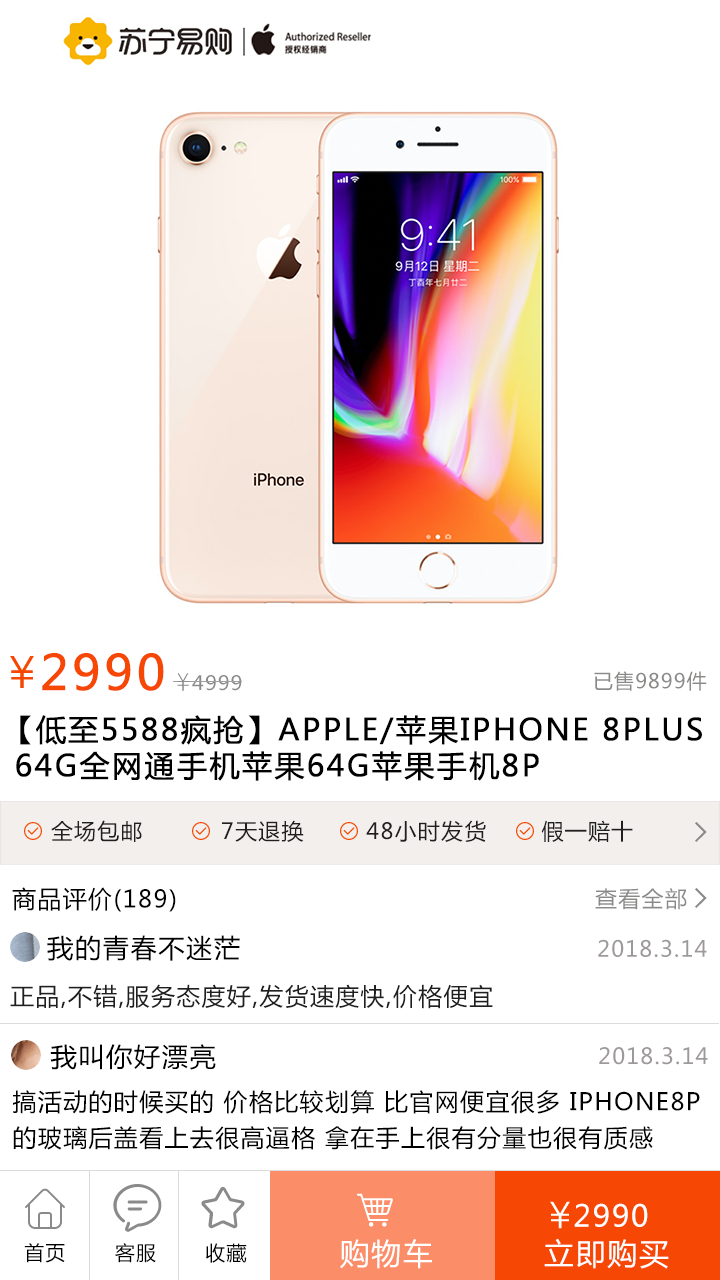
<style>
.page{position:relative;width:720px;height:1280px;background:#ffffff}
.page>*{position:absolute;margin:0}
.t1{font:48px "MicrosoftYaHei";letter-spacing:0.055em;color:#f64804;text-transform:uppercase;font-weight:bold}
.t2{font:48px "MicrosoftYaHei";letter-spacing:0.055em;color:#8c8a89;text-transform:uppercase}
.t3{font:19.6px "MicrosoftYaHei";letter-spacing:0.055em;color:#8c8a89;text-transform:uppercase}
.t4{font:20.3px "MicrosoftYaHei";letter-spacing:0.055em;color:#8c8a89;text-transform:uppercase}
.t5{font:30px/36px "MicrosoftYaHei";letter-spacing:0.055em;color:#000000;text-transform:uppercase;font-weight:bold}
.t6{font:22px "MicrosoftYaHei";letter-spacing:0.055em;color:#201f1f;text-transform:uppercase}
.t7{font:24px "MicrosoftYaHei";letter-spacing:0.055em;color:#000000;text-transform:uppercase}
.t8{font:22px "MicrosoftYaHei";letter-spacing:0.055em;color:#8c8a89;text-transform:uppercase}
.t9{font:26px "MicrosoftYaHei";letter-spacing:0.055em;color:#000000;text-transform:uppercase}
.t10{font:22px "MicrosoftYaHei";letter-spacing:0.055em;color:#9d9998;text-transform:uppercase}
.t11{font:24px "MicrosoftYaHei";letter-spacing:0.055em;color:#201f1f;text-transform:uppercase}
.t12{font:24px/36px "MicrosoftYaHei";letter-spacing:0.055em;color:#000000;text-transform:uppercase}
.t13{font:30px "MicrosoftYaHei";letter-spacing:0.055em;color:#ffffff;text-transform:uppercase}
.t14{font:20px "MicrosoftYaHei";letter-spacing:0.055em;color:#000000;text-transform:uppercase}
</style>
<div class="page">
<p class="t1" style="left:42px;top:653px;width:122px;height:38px"><span class="t2">    </span>2990</p>
<p class="t3" style="left:192px;top:675px;width:50px;height:16px">4999</p>
<p class="t4" style="left:594px;top:671px;width:113px;height:20px">已售9899件</p>
<p class="t5" style="left:16px;top:715px;width:686px;height:66px">【低至5588疯抢】Apple/苹果iPhone 8Plus<br> 64G全网通手机苹果64G苹果手机8p</p>
<p class="t6" style="left:51px;top:820px;width:582px;height:22px">全场包邮          7天退换        48小时发货       假一赔十</p>
<p class="t7" style="left:12px;top:887px;width:164px;height:25px">商品评价(189)</p>
<p class="t8" style="left:595px;top:888px;width:92px;height:22px">查看全部</p>
<p class="t9" style="left:47px;top:935px;width:193px;height:26px">我的青春不迷茫</p>
<p class="t10" style="left:598px;top:939px;width:109px;height:18px">2018.3.14</p>
<p class="t11" style="left:10px;top:984px;width:483px;height:25px">正品,不错,服务态度好,发货速度快,价格便宜</p>
<p class="t9" style="left:50px;top:1044px;width:166px;height:26px">我叫你好漂亮</p>
<p class="t10" style="left:599px;top:1047px;width:109px;height:18px">2018.3.14</p>
<p class="t12" style="left:13px;top:1090px;width:687px;height:60px">搞活动的时候买的 价格比较划算 比官网便宜很多 iphone8P<br>的玻璃后盖看上去很高逼格 拿在手上很有分量也很有质感</p>
<p class="t13" style="left:574px;top:1203px;width:74px;height:24px">2990</p>
<p class="t13" style="left:340px;top:1239px;width:92px;height:30px">购物车</p>
<p class="t13" style="left:544px;top:1238px;width:125px;height:31px">立即购买</p>
<p class="t14" style="left:24px;top:1243px;width:41px;height:20px">首页</p>
<p class="t14" style="left:115px;top:1243px;width:41px;height:20px">客服</p>
<p class="t14" style="left:206px;top:1243px;width:41px;height:20px">收藏</p>
</div>
